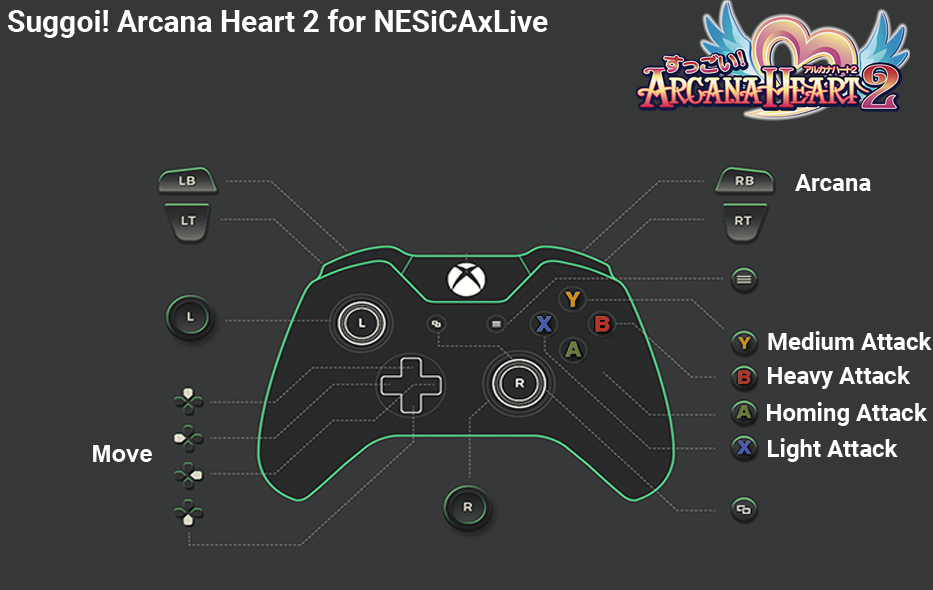
<style>
.page{position:relative;width:933px;height:590px;background:#363838}
.page>*{position:absolute;margin:0}
.t1{font:30px "Roboto-Bold";color:#ffffff}
.t2{font:24px "Roboto-Bold";color:#ffffff}
.t3{font:24px "Arial-BoldMT";color:#fefefe}
</style>
<div class="page">
<p class="t1" style="left:8px;top:9px;width:540px;height:29px">Suggoi! Arcana Heart 2 for NESiCAxLive</p>
<p class="t2" style="left:795px;top:174px;width:76px;height:17px">Arcana</p>
<p class="t2" style="left:768px;top:331px;width:164px;height:19px">Medium Attack</p>
<p class="t2" style="left:768px;top:366px;width:143px;height:23px">Heavy Attack</p>
<p class="t2" style="left:767px;top:402px;width:161px;height:24px">Homing Attack</p>
<p class="t2" style="left:768px;top:438px;width:130px;height:24px">Light Attack</p>
<p class="t3" style="left:93px;top:445px;width:59px;height:17px">Move</p>
</div>
